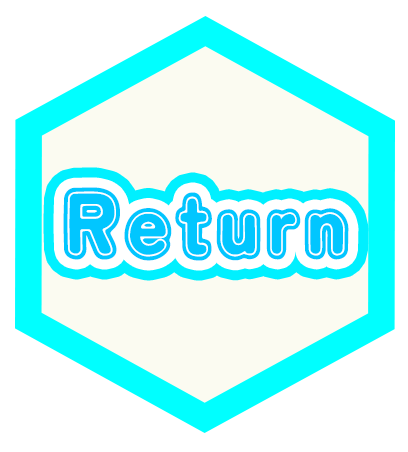
<style>
.page{position:relative;width:408px;height:452px;background:#ffffff}
.page>*{position:absolute;margin:0}
.t1{font:100px "DokiDokiFantasia";color:#01c6ff}
</style>
<div class="page">
<p class="t1" style="left:63px;top:187px;width:286px;height:74px">Return</p>
</div>
